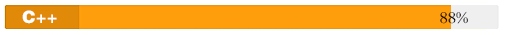
<style>
.page{position:relative;width:507px;height:35px;background:#ff9e0c}
.page>*{position:absolute;margin:0}
.t1{font:17px "FZCCHJW--GB1-0";color:#ffffff}
.t2{font:17px "FZBSK--GBK1-0";color:#000000}
</style>
<div class="page">
<p class="t1" style="left:22px;top:10px;width:35px;height:14px">C++</p>
<p class="t2" style="left:440px;top:11px;width:28px;height:13px">88%</p>
</div>
